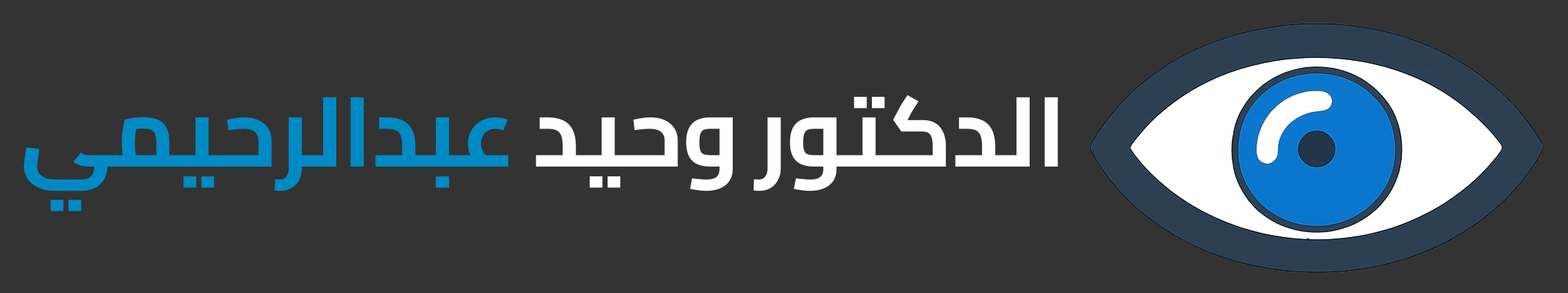
<style>
.page{position:relative;width:1568px;height:293px;background:#333333}
.page>*{position:absolute;margin:0}
.t1{font:98px "Cairo-Bold";letter-spacing:-0.01em;color:#ffffff}
.t2{font:98px "Cairo-Bold";letter-spacing:-0.01em;color:#008ac4}
</style>
<div class="page">
<p class="t1" style="left:24px;top:95px;width:1034px;height:117px">الدكتور وحيد <span class="t2">عبدالرحيمي</span></p>
</div>
